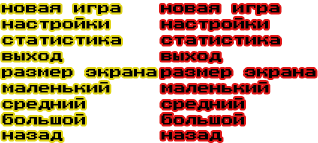
<style>
.page{position:relative;width:318px;height:143px;background:#ffffff}
.page>*{position:absolute;margin:0}
.t1{font:12px "PressStart2P-Regular";color:#010101}
</style>
<div class="page">
<p class="t1" style="left:2px;top:5px;width:119px;height:9px">новая игра</p>
<p class="t1" style="left:161px;top:5px;width:119px;height:9px">новая игра</p>
<p class="t1" style="left:2px;top:18px;width:107px;height:12px">настройки</p>
<p class="t1" style="left:161px;top:18px;width:107px;height:12px">настройки</p>
<p class="t1" style="left:2px;top:37px;width:119px;height:8px">статистика</p>
<p class="t1" style="left:161px;top:37px;width:119px;height:8px">статистика</p>
<p class="t1" style="left:2px;top:53px;width:61px;height:9px">выход</p>
<p class="t1" style="left:161px;top:53px;width:61px;height:9px">выход</p>
<p class="t1" style="left:2px;top:69px;width:155px;height:9px">размер экрана</p>
<p class="t1" style="left:161px;top:69px;width:155px;height:9px">размер экрана</p>
<p class="t1" style="left:2px;top:82px;width:108px;height:11px">маленький</p>
<p class="t1" style="left:161px;top:82px;width:108px;height:11px">маленький</p>
<p class="t1" style="left:2px;top:98px;width:83px;height:12px">средний</p>
<p class="t1" style="left:161px;top:98px;width:83px;height:12px">средний</p>
<p class="t1" style="left:2px;top:114px;width:83px;height:11px">большой</p>
<p class="t1" style="left:161px;top:114px;width:83px;height:11px">большой</p>
<p class="t1" style="left:2px;top:132px;width:61px;height:9px">назад</p>
<p class="t1" style="left:161px;top:132px;width:61px;height:9px">назад</p>
</div>
